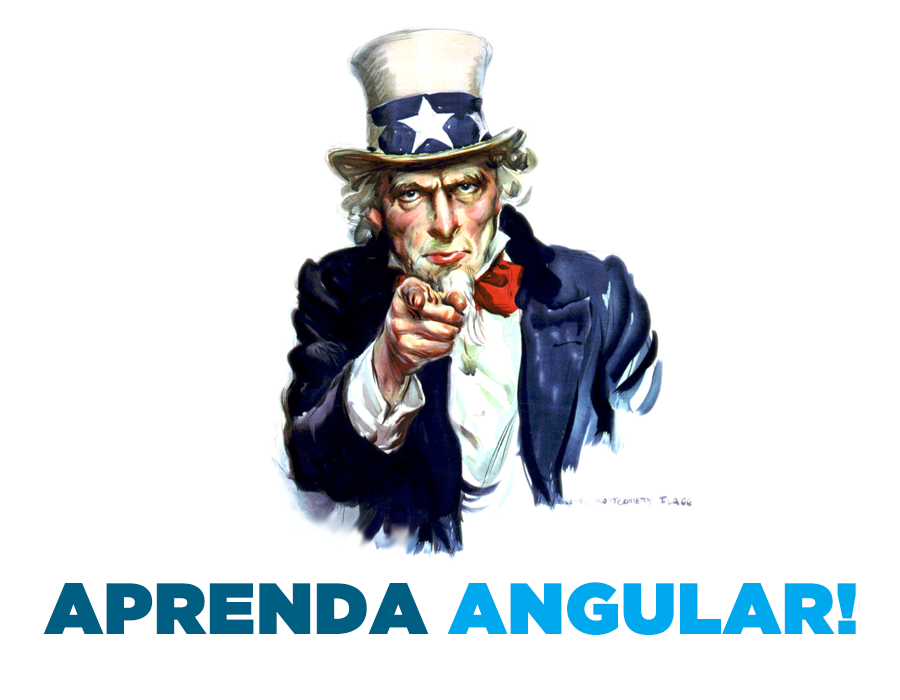
<style>
.page{position:relative;width:900px;height:700px;background:#ffffff}
.page>*{position:absolute;margin:0}
.t1{font:71.2px "GothamUltra";color:#00a9ee;font-weight:bold}
.t2{font:71.2px "GothamUltra";color:#005e83;font-weight:bold}
</style>
<div class="page">
<p class="t1" style="left:43px;top:582px;width:813px;height:53px"><span class="t2">APRENDA </span>ANGULAR!</p>
</div>
